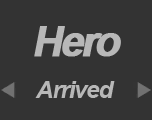
<style>
.page{position:relative;width:152px;height:120px;background:#333333}
.page>*{position:absolute;margin:0}
.t1{font:42.3px "Arial-BoldMT";letter-spacing:-0.1em;color:#b8b8b8;font-weight:bold;font-style:italic}
.t2{font:24px "Arial-BoldItalicMT";letter-spacing:-0.05em;color:#b8b8b8}
</style>
<div class="page">
<p class="t1" style="left:34px;top:26px;width:87px;height:31px">Hero</p>
<p class="t2" style="left:35px;top:81px;width:80px;height:17px">Arrived</p>
</div>
